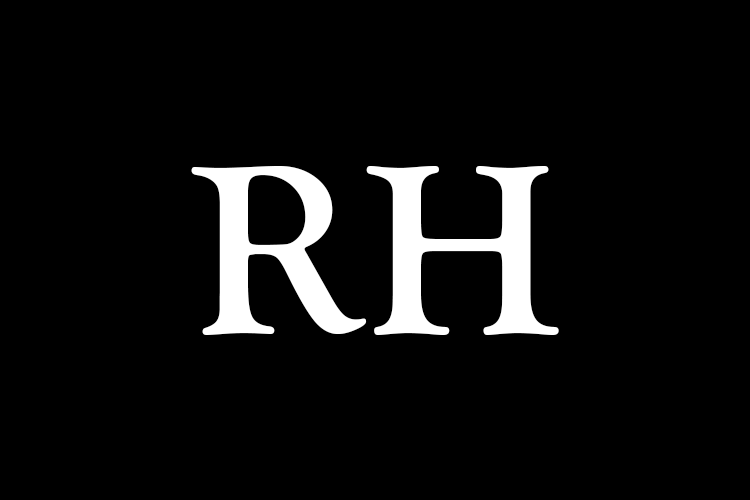
<style>
.page{position:relative;width:750px;height:500px;background:#000000}
.page>*{position:absolute;margin:0}
.t1{font:250px "GoudyOldStyleT-Bold";color:#ffffff}
</style>
<div class="page">
<p class="t1" style="left:191px;top:166px;width:368px;height:169px">RH</p>
</div>
